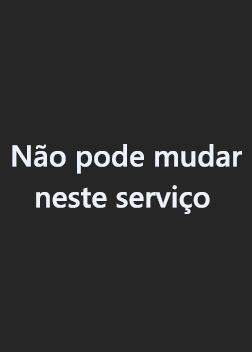
<style>
.page{position:relative;width:252px;height:352px;background:#262626}
.page>*{position:absolute;margin:0}
.t1{font:30px "YuGothicUI-Semibold";color:#edf1f9}
</style>
<div class="page">
<p class="t1" style="left:12px;top:144px;width:230px;height:30px">Não pode mudar</p>
<p class="t1" style="left:36px;top:185px;width:174px;height:29px">neste serviço</p>
</div>
